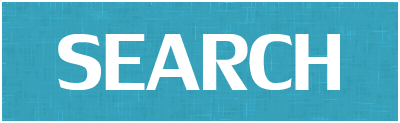
<style>
.page{position:relative;width:400px;height:123px;background:#36a0b8}
.page>*{position:absolute;margin:0}
.t1{font:120px "LilyUPC";color:#ffffff}
</style>
<div class="page">
<p class="t1" style="left:58px;top:34px;width:282px;height:56px">SEARCH</p>
</div>
